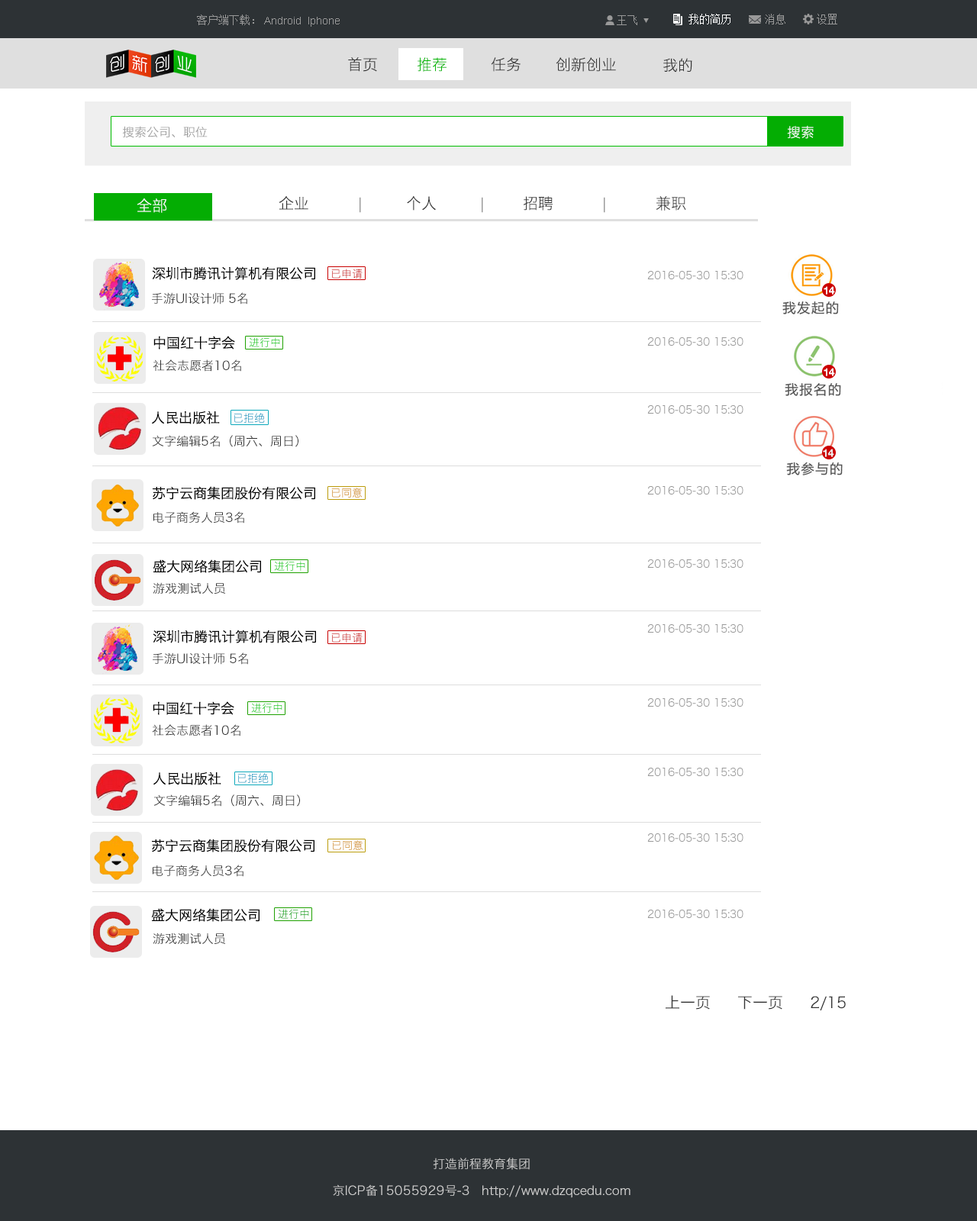
<style>
.page{position:relative;width:977px;height:1221px;background:#ffffff}
.page>*{position:absolute;margin:0}
.t1{font:10.7px "SimSun";color:#999999}
.t2{font:10.7px "ArialMT";color:#999999}
.t3{font:10.7px "SimSun";color:#ffffff}
.t4{font:15.3px "HiraginoSansGB-W3";color:#333333}
.t5{font:15.3px "HiraginoSansGB-W3";color:#06b705}
.t6{font:12.2px "HiraginoSansGB-W3";color:#999999}
.t7{font:13.7px "HiraginoSansGB-W3";color:#ffffff}
.t8{font:15.3px "HiraginoSansGB-W3";color:#ffffff}
.t9{font:15.3px "HiraginoSansGB-W3";color:#999999}
.t10{font:13.7px "HiraginoSansGB-W3";color:#000000}
.t11{font:10.7px "HiraginoSansGB-W3"}
.t12{font:10.7px "HiraginoSansGB-W3";color:#999999}
.t13{font:12.2px "HiraginoSansGB-W3";color:#333333}
.t14{font:10.7px "HelveticaNeue-Bold";color:#ffffff}
.t15{font:10.7px "HelveticaNeue-Bold";color:#efefef}
.t16{font:12.2px "HiraginoSansGB-W3";color:#cccccc}
</style>
<div class="page">
<p class="t1" style="left:197px;top:14px;width:57px;height:11px">客户端下载：</p>
<p class="t2" style="left:264px;top:17px;width:76px;height:10px">Android  Iphone</p>
<p class="t1" style="left:617px;top:15px;width:20px;height:10px">王飞</p>
<p class="t3" style="left:688px;top:14px;width:42px;height:10px">我的简历</p>
<p class="t1" style="left:765px;top:14px;width:20px;height:10px">消息</p>
<p class="t1" style="left:816px;top:14px;width:21px;height:10px">设置</p>
<p class="t4" style="left:348px;top:57px;width:29px;height:15px">首页</p>
<p class="t5" style="left:417px;top:57px;width:29px;height:15px">推荐</p>
<p class="t4" style="left:491px;top:57px;width:29px;height:15px">任务</p>
<p class="t4" style="left:555px;top:57px;width:61px;height:15px">创新创业</p>
<p class="t4" style="left:663px;top:58px;width:29px;height:14px">我的</p>
<p class="t6" style="left:123px;top:126px;width:85px;height:12px">搜索公司、职位</p>
<p class="t7" style="left:787px;top:125px;width:26px;height:14px">搜索</p>
<p class="t8" style="left:137px;top:198px;width:29px;height:15px">全部</p>
<p class="t4" style="left:279px;top:195px;width:407px;height:18px">企业        <span class="t9"> | </span>       个人        <span class="t9">| </span>      招聘         <span class="t9">| </span>        兼职</p>
<p class="t10" style="left:152px;top:266px;width:163px;height:14px">深圳市腾讯计算机有限公司</p>
<p class="t11" style="left:331px;top:269px;width:31px;height:10px">已申请</p>
<p class="t12" style="left:647px;top:271px;width:96px;height:8px">2016-05-30 15:30</p>
<p class="t13" style="left:152px;top:292px;width:95px;height:12px">手游UI设计师 5名</p>
<p class="t14" style="left:823px;top:286px;width:12px;height:9px">14</p>
<p class="t10" style="left:153px;top:336px;width:82px;height:13px">中国红十字会</p>
<p class="t11" style="left:249px;top:337px;width:31px;height:10px">进行中</p>
<p class="t12" style="left:647px;top:337px;width:96px;height:9px">2016-05-30 15:30</p>
<p class="t13" style="left:153px;top:359px;width:88px;height:13px">社会志愿者10名</p>
<p class="t14" style="left:823px;top:368px;width:12px;height:8px">14</p>
<p class="t10" style="left:151px;top:411px;width:69px;height:13px">人民出版社</p>
<p class="t11" style="left:233px;top:413px;width:32px;height:10px">已拒绝</p>
<p class="t12" style="left:647px;top:405px;width:96px;height:9px">2016-05-30 15:30</p>
<p class="t13" style="left:152px;top:435px;width:146px;height:12px">文字编辑5名（周六、周日）</p>
<p class="t15" style="left:823px;top:449px;width:11px;height:8px">14</p>
<p class="t10" style="left:153px;top:486px;width:162px;height:14px">苏宁云商集团股份有限公司</p>
<p class="t11" style="left:331px;top:488px;width:31px;height:10px">已同意</p>
<p class="t12" style="left:647px;top:486px;width:96px;height:8px">2016-05-30 15:30</p>
<p class="t13" style="left:153px;top:511px;width:91px;height:12px">电子商务人员3名</p>
<p class="t10" style="left:153px;top:559px;width:108px;height:14px">盛大网络集团公司</p>
<p class="t11" style="left:274px;top:561px;width:31px;height:10px">进行中</p>
<p class="t12" style="left:647px;top:559px;width:96px;height:9px">2016-05-30 15:30</p>
<p class="t13" style="left:153px;top:582px;width:72px;height:12px">游戏测试人员</p>
<p class="t10" style="left:153px;top:630px;width:163px;height:13px">深圳市腾讯计算机有限公司</p>
<p class="t12" style="left:647px;top:624px;width:96px;height:9px">2016-05-30 15:30</p>
<p class="t11" style="left:331px;top:633px;width:31px;height:9px">已申请</p>
<p class="t13" style="left:153px;top:652px;width:95px;height:13px">手游UI设计师 5名</p>
<p class="t10" style="left:153px;top:701px;width:81px;height:14px">中国红十字会</p>
<p class="t12" style="left:647px;top:698px;width:96px;height:9px">2016-05-30 15:30</p>
<p class="t11" style="left:251px;top:703px;width:31px;height:10px">进行中</p>
<p class="t13" style="left:152px;top:724px;width:88px;height:12px">社会志愿者10名</p>
<p class="t10" style="left:153px;top:771px;width:68px;height:14px">人民出版社</p>
<p class="t11" style="left:237px;top:773px;width:32px;height:10px">已拒绝</p>
<p class="t12" style="left:647px;top:768px;width:96px;height:8px">2016-05-30 15:30</p>
<p class="t13" style="left:153px;top:794px;width:147px;height:13px">文字编辑5名（周六、周日）</p>
<p class="t12" style="left:647px;top:833px;width:96px;height:9px">2016-05-30 15:30</p>
<p class="t10" style="left:152px;top:839px;width:162px;height:13px">苏宁云商集团股份有限公司</p>
<p class="t11" style="left:332px;top:840px;width:31px;height:10px">已同意</p>
<p class="t13" style="left:153px;top:865px;width:90px;height:12px">电子商务人员3名</p>
<p class="t10" style="left:151px;top:908px;width:108px;height:14px">盛大网络集团公司</p>
<p class="t11" style="left:278px;top:909px;width:31px;height:10px">进行中</p>
<p class="t12" style="left:647px;top:910px;width:96px;height:8px">2016-05-30 15:30</p>
<p class="t13" style="left:153px;top:932px;width:72px;height:13px">游戏测试人员</p>
<p class="t4" style="left:665px;top:995px;width:180px;height:15px">上一页     下一页     2/15</p>
<p class="t16" style="left:433px;top:1158px;width:97px;height:12px">打造前程教育集团</p>
<p class="t16" style="left:333px;top:1184px;width:297px;height:14px">京ICP备15055929号-3   http://www.dzqcedu.com</p>
</div>
